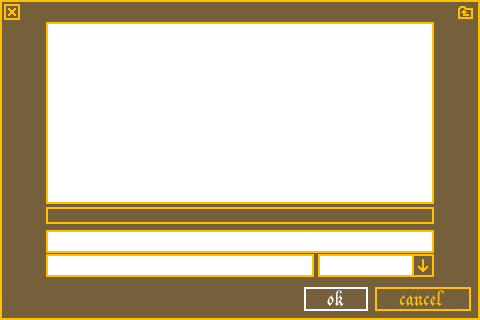
<style>
.page{position:relative;width:480px;height:320px;background:#ffffff}
.page>*{position:absolute;margin:0}
.t1{font:36px "Parchment-Regular";letter-spacing:0.02em;color:#ffc000}
.t2{font:36px "Parchment-Regular";letter-spacing:0.02em;color:#ffffff}
</style>
<div class="page">
<p class="t1" style="left:327px;top:290px;width:117px;height:17px"><span class="t2">ok</span>              cancel</p>
</div>
